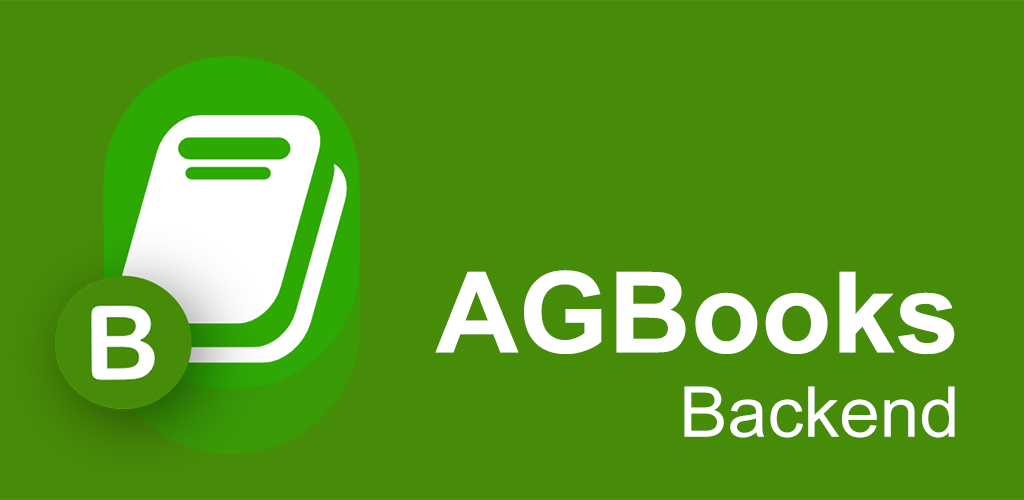
<style>
.page{position:relative;width:1024px;height:500px;background:#478c08}
.page>*{position:absolute;margin:0}
.t1{font:112.3px "Arial-BoldMT";color:#ffffff}
.t2{font:70.3px "ArialMT";color:#ffffff}
</style>
<div class="page">
<p class="t1" style="left:435px;top:270px;width:520px;height:168px;text-align:right">AGBooks<br><span class="t2">Backend</span></p>
</div>
